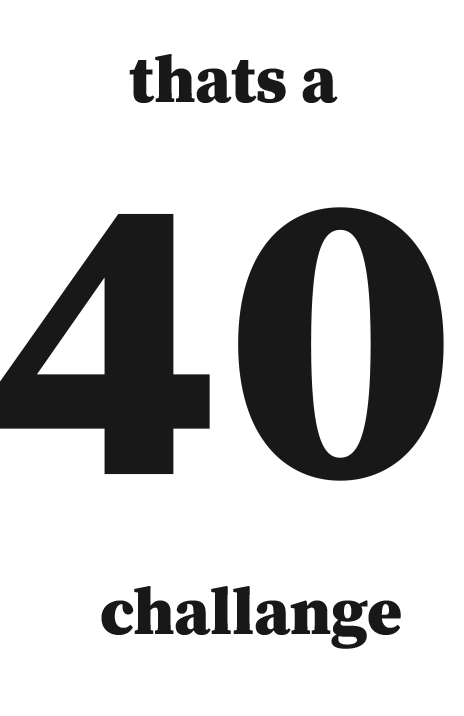
<style>
.page{position:relative;width:464px;height:716px;background:#ffffff}
.page>*{position:absolute;margin:0}
.t1{font:66.7px "SourceSerifRoman-Black";color:#181818}
.t2{font:416.7px "SourceSerifRoman-Black";color:#181818}
</style>
<div class="page">
<p class="t1" style="left:129px;top:54px;width:209px;height:49px">thats a</p>
<p class="t2" style="left:0px;top:207px;width:444px;height:274px">40</p>
<p class="t1" style="left:101px;top:586px;width:300px;height:63px">challange</p>
</div>
